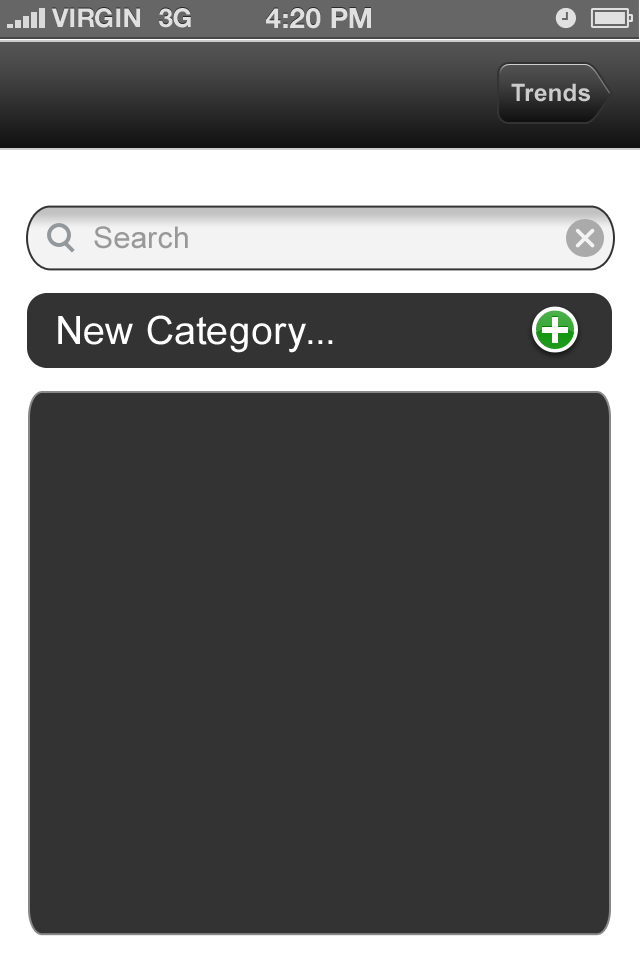
<style>
.page{position:relative;width:640px;height:960px;background:#333333}
.page>*{position:absolute;margin:0}
.t1{font:26px "HelveticaNeue-Bold";color:#e0e0e0;text-transform:uppercase}
.t2{font:28px "HelveticaNeue-Bold";color:#e0e0e0;text-transform:uppercase}
.t3{font:24px "Arial-BoldMT";letter-spacing:0.02em;color:#cccccc}
.t4{font:30px "ArialMT";letter-spacing:0.02em;color:#999999}
.t5{font:39px "ArialMT";letter-spacing:0.02em;color:#ffffff}
</style>
<div class="page">
<p class="t1" style="left:51px;top:8px;width:89px;height:20px">VIRGIN</p>
<p class="t1" style="left:159px;top:8px;width:32px;height:20px">3G</p>
<p class="t2" style="left:266px;top:8px;width:105px;height:21px">4:20 pM</p>
<p class="t3" style="left:511px;top:83px;width:79px;height:19px">Trends</p>
<p class="t4" style="left:94px;top:226px;width:94px;height:23px">Search</p>
<p class="t5" style="left:58px;top:315px;width:275px;height:38px">New Category...</p>
</div>
